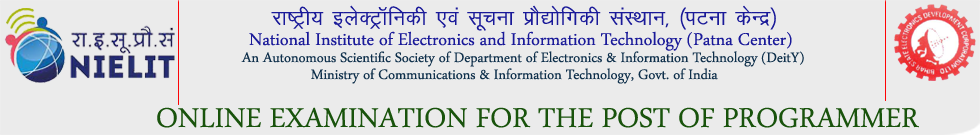
<style>
.page{position:relative;width:980px;height:135px;background:#ebebeb}
.page>*{position:absolute;margin:0}
.t1{font:25px "KrutiDev010";color:#1a1a99}
.t2{font:25px "ArabicTypesetting";color:#1a1a99}
.t3{font:20px "ArabicTypesetting";color:#0f304b}
.t4{font:40px "ArabicTypesetting";color:#19530c}
</style>
<div class="page">
<p class="t1" style="left:271px;top:5px;width:505px;height:26px">jk"Vªh; bysDVªkWfudh ,oa lwpuk izkS|ksfxdh laLFkku] ¼iVuk dsUnz½</p>
<p class="t2" style="left:249px;top:31px;width:543px;height:20px">National Institute of Electronics and Information Technology (Patna Center)</p>
<p class="t3" style="left:241px;top:51px;width:563px;height:16px">An Autonomous Scientific Society of Department of Electronics &amp; Information Technology (DeitY)</p>
<p class="t3" style="left:311px;top:68px;width:407px;height:16px">Ministry of Communications &amp; Information Technology, Govt. of India</p>
<p class="t4" style="left:157px;top:107px;width:762px;height:21px">ONLINE EXAMINATION FOR THE POST OF PROGRAMMER</p>
</div>
